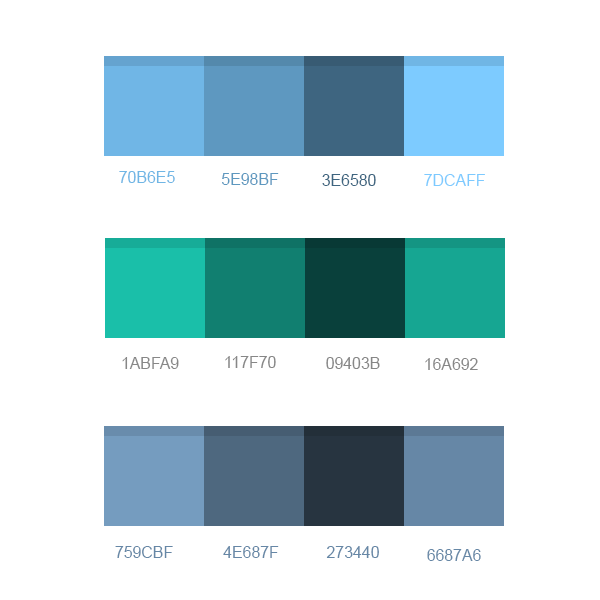
<style>
.page{position:relative;width:600px;height:600px;background:#ffffff}
.page>*{position:absolute;margin:0}
.t1{font:15.9px "ArialMT";color:#70b6e5;text-transform:uppercase}
.t2{font:15.9px "ArialMT";color:#5e98bf;text-transform:uppercase}
.t3{font:15.9px "ArialMT";color:#3e6580;text-transform:uppercase}
.t4{font:15.9px "ArialMT";color:#7dcaff;text-transform:uppercase}
.t5{font:15.9px "ArialMT";color:#878787;text-transform:uppercase}
.t6{font:15.9px "ArialMT";color:#6687a6;text-transform:uppercase}
</style>
<div class="page">
<p class="t1" style="left:119px;top:171px;width:56px;height:12px">70b6e5</p>
<p class="t2" style="left:222px;top:173px;width:57px;height:12px">5e98bf</p>
<p class="t3" style="left:322px;top:174px;width:54px;height:12px">3e6580</p>
<p class="t4" style="left:424px;top:174px;width:61px;height:12px">7dcaff</p>
<p class="t5" style="left:122px;top:357px;width:57px;height:12px">1abfa9</p>
<p class="t5" style="left:225px;top:356px;width:51px;height:12px">117f70</p>
<p class="t5" style="left:326px;top:357px;width:54px;height:12px">09403b</p>
<p class="t5" style="left:425px;top:358px;width:53px;height:12px">16a692</p>
<p class="t6" style="left:115px;top:546px;width:58px;height:12px">759CBF</p>
<p class="t6" style="left:223px;top:546px;width:56px;height:12px">4E687F</p>
<p class="t6" style="left:326px;top:546px;width:53px;height:12px">273440</p>
<p class="t6" style="left:427px;top:549px;width:54px;height:12px">6687A6</p>
</div>
